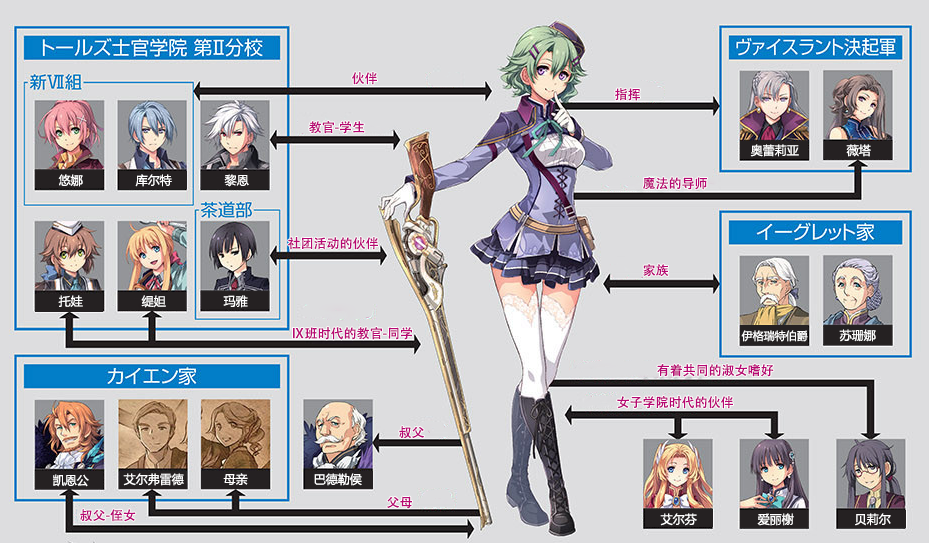
<style>
.page{position:relative;width:929px;height:543px;background:#dddddf}
.page>*{position:absolute;margin:0}
.t1{font:13px "AdobeHeitiStd-Regular";color:#b70773}
.t2{font:12px "MicrosoftYaHei";color:#ffffff}
.t3{font:11px "MicrosoftYaHei";color:#ffffff}
</style>
<div class="page">
<p class="t1" style="left:352px;top:72px;width:25px;height:13px">伙伴</p>
<p class="t1" style="left:615px;top:88px;width:25px;height:13px">指挥</p>
<p class="t1" style="left:309px;top:121px;width:56px;height:13px">教官-学生</p>
<p class="t2" style="left:750px;top:144px;width:49px;height:13px">奥蕾莉亚</p>
<p class="t2" style="left:846px;top:144px;width:25px;height:13px">薇塔</p>
<p class="t2" style="left:58px;top:174px;width:25px;height:13px">悠娜</p>
<p class="t2" style="left:135px;top:174px;width:37px;height:13px">库尔特</p>
<p class="t2" style="left:224px;top:174px;width:25px;height:13px">黎恩</p>
<p class="t1" style="left:643px;top:177px;width:64px;height:13px">魔法的导师</p>
<p class="t1" style="left:288px;top:237px;width:90px;height:13px">社团活动的伙伴</p>
<p class="t1" style="left:643px;top:264px;width:26px;height:13px">家族</p>
<p class="t2" style="left:58px;top:295px;width:25px;height:12px">托娃</p>
<p class="t2" style="left:141px;top:295px;width:25px;height:13px">缇妲</p>
<p class="t2" style="left:223px;top:295px;width:25px;height:13px">玛雅</p>
<p class="t1" style="left:293px;top:327px;width:119px;height:13px">Ⅸ班时代的教官-同学</p>
<p class="t2" style="left:839px;top:329px;width:37px;height:13px">苏珊娜</p>
<p class="t3" style="left:741px;top:330px;width:67px;height:12px">伊格瑞特伯爵</p>
<p class="t1" style="left:657px;top:364px;width:117px;height:13px">有着共同的淑女嗜好</p>
<p class="t1" style="left:617px;top:396px;width:116px;height:13px">女子学院时代的伙伴</p>
<p class="t1" style="left:399px;top:426px;width:25px;height:13px">叔父</p>
<p class="t2" style="left:123px;top:473px;width:61px;height:13px">艾尔弗雷德</p>
<p class="t2" style="left:223px;top:473px;width:25px;height:12px">母亲</p>
<p class="t2" style="left:314px;top:473px;width:48px;height:13px">巴德勒侯</p>
<p class="t2" style="left:53px;top:474px;width:36px;height:13px">凯恩公</p>
<p class="t1" style="left:387px;top:496px;width:25px;height:13px">父母</p>
<p class="t1" style="left:80px;top:509px;width:56px;height:13px">叔父-侄女</p>
<p class="t2" style="left:660px;top:513px;width:37px;height:13px">艾尔芬</p>
<p class="t2" style="left:757px;top:513px;width:37px;height:13px">爱丽榭</p>
<p class="t2" style="left:855px;top:513px;width:36px;height:13px">贝莉尔</p>
</div>
